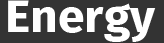
<style>
.page{position:relative;width:164px;height:43px;background:#333333}
.page>*{position:absolute;margin:0}
.t1{font:45.6px "FiraSans-Bold";color:#ffffff;scale:1.05 1}
</style>
<div class="page">
<p class="t1" style="left:8px;top:0px;width:148px;height:42px">Energy</p>
</div>
